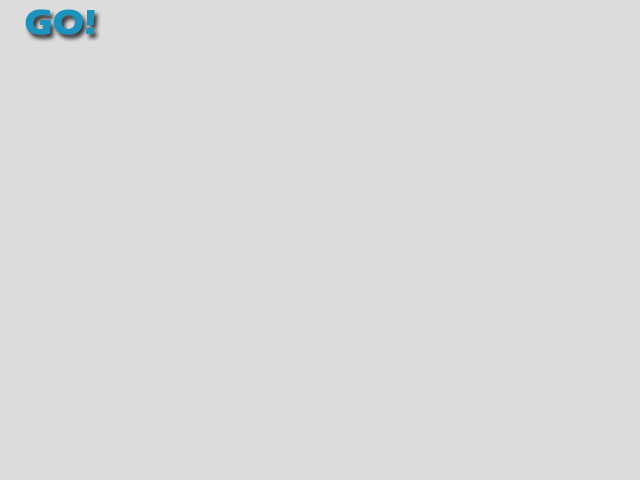
<style>
.page{position:relative;width:640px;height:480px;background:#dcdcdc}
.page>*{position:absolute;margin:0}
.t1{font:36px "ErasITC-Bold";color:#1c92be}
</style>
<div class="page">
<p class="t1" style="left:25px;top:9px;width:70px;height:26px">GO!</p>
</div>
